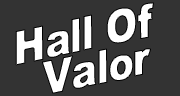
<style>
.page{position:relative;width:180px;height:96px;background:#333333}
.page>*{position:absolute;margin:0}
.t1{font:45.6px/35.9px "Arial-Black";letter-spacing:-0.05em;color:#ffffff;font-weight:bold;font-style:italic;scale:0.86 1}
</style>
<div class="page">
<p class="t1" style="left:15px;top:2px;width:139px;height:92px;text-align:center;rotate:-12deg">Hall Of <br>Valor</p>
</div>
